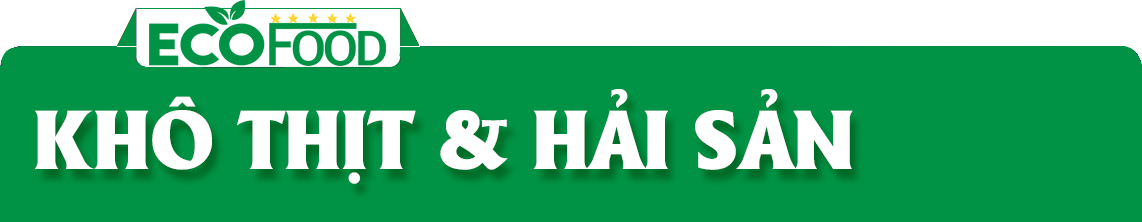
<style>
.page{position:relative;width:1142px;height:222px;background:#009345}
.page>*{position:absolute;margin:0}
.t1{font:81px "UTM-Alberta-Heavy";color:#ffffff}
</style>
<div class="page">
<p class="t1" style="left:35px;top:89px;width:818px;height:95px">KHÔ THỊT &amp; HẢI SẢN</p>
</div>
